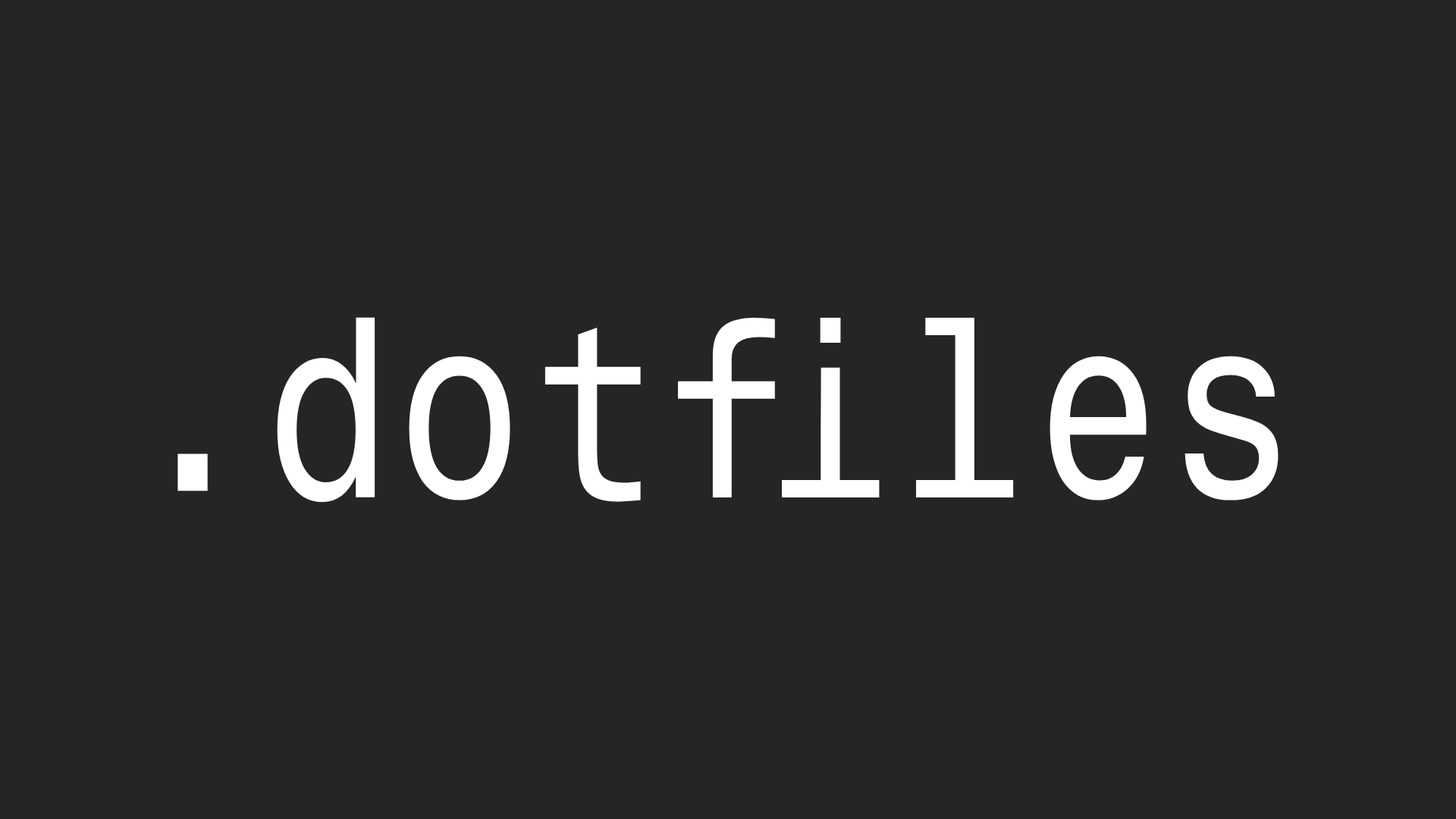
<style>
.page{position:relative;width:1456px;height:819px;background:#252525}
.page>*{position:absolute;margin:0}
.t1{font:227.5px "MonospaceTypewriter";color:#ffffff}
</style>
<div class="page">
<p class="t1" style="left:177px;top:317px;width:1102px;height:185px">.dotfiles</p>
</div>
